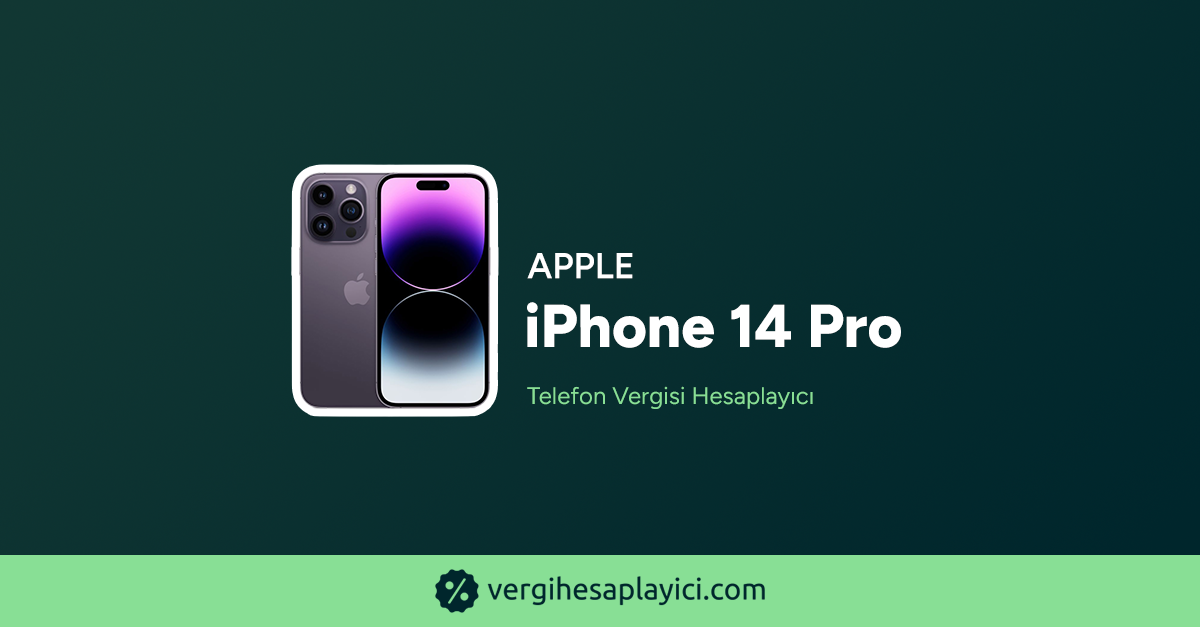
<style>
.page{position:relative;width:1200px;height:627px}
.page>*{position:absolute;margin:0}
.t1{font:36px "Figtree-SemiBold";color:#ffffff;text-transform:uppercase;font-weight:bold}
.t2{font:60.3px "Figtree-ExtraBold";color:#ffffff;font-weight:bold}
.t3{font:24px "Figtree-Regular";color:#88df95;font-weight:bold}
</style>
<div class="page">
<p class="t1" style="left:527px;top:253px;width:106px;height:26px">Apple</p>
<p class="t2" style="left:527px;top:302px;width:374px;height:46px">iPhone 14 Pro</p>
<p class="t3" style="left:527px;top:386px;width:286px;height:23px">Telefon Vergisi Hesaplayıcı</p>
</div>
